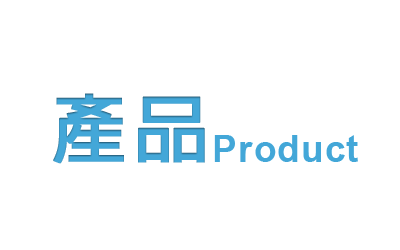
<style>
.page{position:relative;width:400px;height:250px;background:#ffffff}
.page>*{position:absolute;margin:0}
.t1{font:74.6px "AdobeFanHeitiStd-Bold";letter-spacing:0.075em;color:#43a7d8;font-weight:bold}
.t2{font:37.3px "Arial-BoldMT";letter-spacing:0.025em;color:#43a7d8}
</style>
<div class="page">
<p class="t1" style="left:53px;top:93px;width:152px;height:71px">產品</p>
<p class="t2" style="left:214px;top:135px;width:144px;height:27px">Product</p>
</div>
